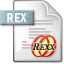
<style>
.page{position:relative;width:64px;height:64px;background:#ffffff}
.page>*{position:absolute;margin:0}
.t1{font:13px "FranklinGothic-DemiCnd";letter-spacing:0.025em;color:#ffffff}
</style>
<div class="page">
<p class="t1" style="left:7px;top:13px;width:20px;height:9px">REX</p>
</div>
